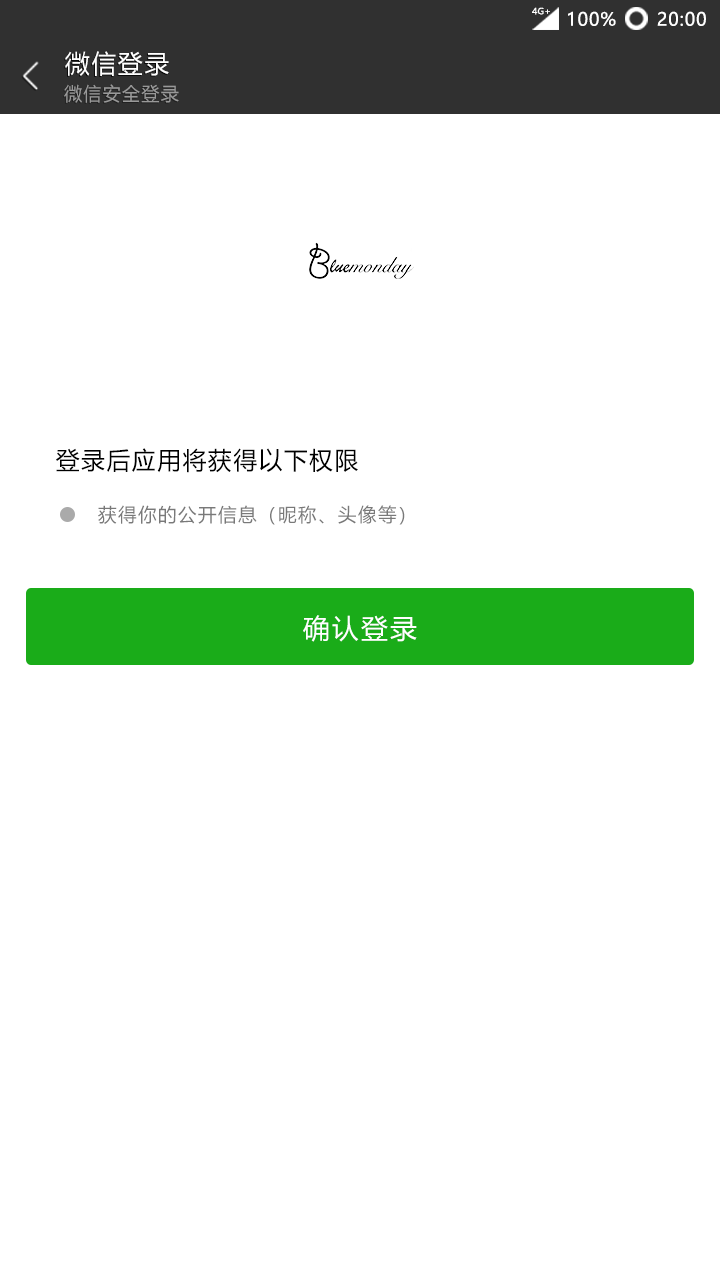
<style>
.page{position:relative;width:720px;height:1280px;background:#ffffff}
.page>*{position:absolute;margin:0}
.t1{font:8.5px "MicrosoftYaHei";letter-spacing:0.01em;color:#ffffff;scale:1.06 1}
.t2{font:18px "MicrosoftYaHei";letter-spacing:0.05em;color:#ffffff}
.t3{font:25.2px "MicrosoftYaHei";letter-spacing:0.08em;color:#ffffff}
.t4{font:18.9px "MicrosoftYaHei";letter-spacing:0.08em;color:#999999;scale:0.95 1}
.t5{font:24.3px "MicrosoftYaHei";letter-spacing:0.08em;color:#000000;scale:0.97 1}
.t6{font:18.9px "MicrosoftYaHei";letter-spacing:0.08em;color:#797979}
.t7{font:27px "MicrosoftYaHei";letter-spacing:0.08em;color:#ffffff}
</style>
<div class="page">
<p class="t1" style="left:532px;top:7px;width:18px;height:8px">4G+</p>
<p class="t2" style="left:568px;top:11px;width:48px;height:15px">100%</p>
<p class="t2" style="left:657px;top:11px;width:49px;height:15px">20:00</p>
<p class="t3" style="left:65px;top:51px;width:104px;height:25px">微信登录</p>
<p class="t4" style="left:64px;top:84px;width:115px;height:19px">微信安全登录</p>
<p class="t5" style="left:56px;top:448px;width:302px;height:25px">登录后应用将获得以下权限</p>
<p class="t6" style="left:98px;top:505px;width:307px;height:20px">获得你的公开信息（昵称、头像等）</p>
<p class="t7" style="left:303px;top:615px;width:114px;height:27px">确认登录</p>
</div>
